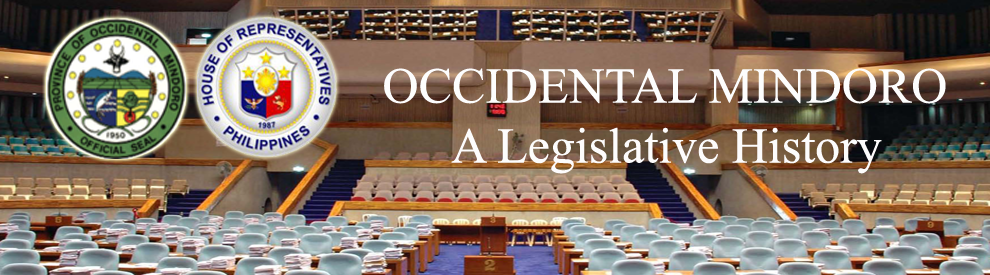
<style>
.page{position:relative;width:990px;height:275px}
.page>*{position:absolute;margin:0}
.t1{font:50px "TimesNewRomanPSMT";color:#fdfcfc}
.t2{font:50px "TimesNewRomanPSMT";color:#fdfdfd}
</style>
<div class="page">
<p class="t1" style="left:384px;top:68px;width:562px;height:106px;text-align:center"><span class="t2">OCCIDENTAL MINDORO<br></span>A Legislative History</p>
</div>
